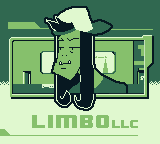
<style>
.page{position:relative;width:160px;height:144px;background:#e0f8cf}
.page>*{position:absolute;margin:0}
.t1{font:16px "8BITWONDERNominal";color:#86c06c;text-transform:uppercase}
.t2{font:9px "8BITWONDERNominal";color:#86c06c;text-transform:uppercase}
</style>
<div class="page">
<p class="t1" style="left:32px;top:115px;width:106px;height:13px">limbo<span class="t2">llc</span></p>
</div>
